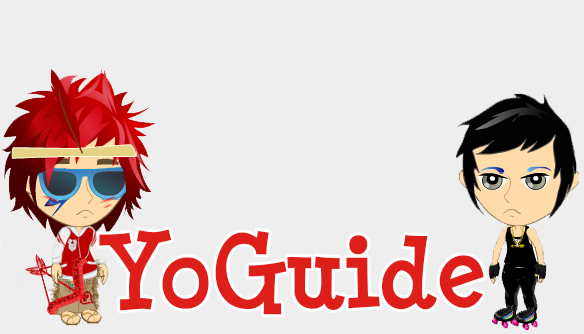
<style>
.page{position:relative;width:584px;height:334px;background:#eeeeee}
.page>*{position:absolute;margin:0}
.t1{font:110px "MinyaNouvelle-Bold";color:#de1f19}
</style>
<div class="page">
<p class="t1" style="left:99px;top:229px;width:385px;height:86px">YoGuide</p>
</div>
